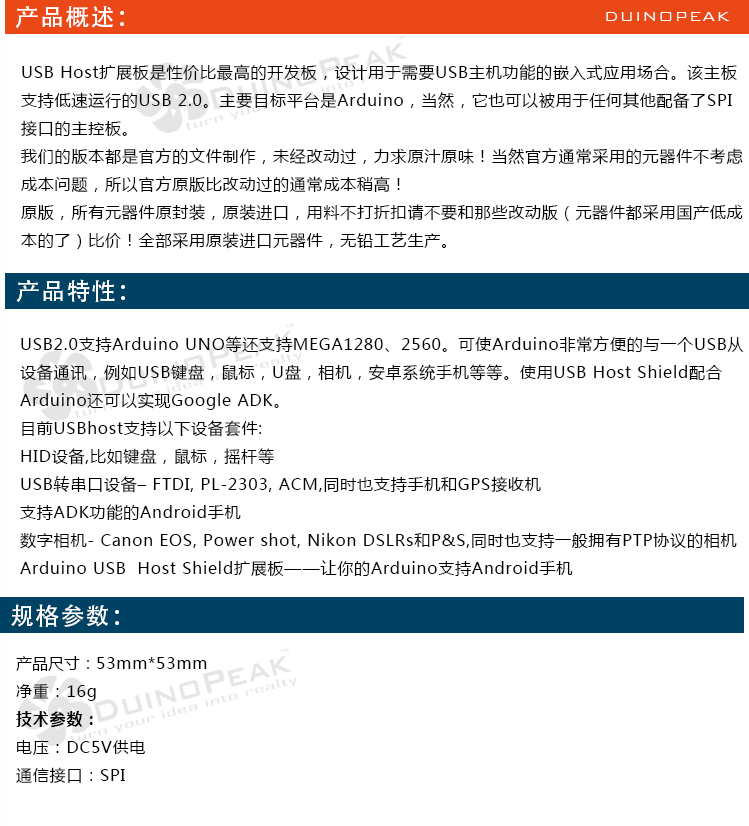
<style>
.page{position:relative;width:749px;height:826px;background:#ffffff}
.page>*{position:absolute;margin:0}
.t1{font:24px "AdobeHeitiStd-Regular";letter-spacing:0.05em;color:#ffffff}
.t2{font:18px "BankGothicBT-Light";letter-spacing:0.05em;color:#ffffff}
.t3{font:16px "MicrosoftYaHei";letter-spacing:0.05em;color:#000000}
.t4{font:16px "MicrosoftYaHei";color:#000000}
.t5{font:16px "MicrosoftYaHei-Bold";letter-spacing:0.05em;color:#000000}
</style>
<div class="page">
<p class="t1" style="left:15px;top:6px;width:109px;height:23px">产品概述：</p>
<p class="t2" style="left:606px;top:12px;width:124px;height:9px">DUINOPEAK</p>
<p class="t3" style="left:21px;top:64px;width:722px;height:185px">USB Host扩展板是性价比最高的开发板，设计用于需要USB主机功能的嵌入式应用场合。该主板<br>支持低速运行的USB 2.0。主要目标平台是Arduino，当然，它也可以被用于任何其他配备了SPI<br>接口的主控板。<br>我们的版本都是官方的文件制作，未经改动过，力求原汁原味！当然官方通常采用的元器件不考虑<br>成本问题，所以官方原版比改动过的通常成本稍高！<br>原版，所有元器件原封装，原装进口，用料不打折扣请不要和那些改动版（元器件都采用国产低成<br>本的了）比价！全部采用原装进口元器件，无铅工艺生产。</p>
<p class="t1" style="left:16px;top:279px;width:109px;height:24px">产品特性：</p>
<p class="t3" style="left:20px;top:336px;width:724px;height:240px">USB2.0支持Arduino UNO等还支持MEGA1280、2560。可使Arduino非常方便的与一个USB从<br>设备通讯，例如USB键盘，鼠标，U盘，相机，安卓系统手机等等。使用USB Host Shield配合<br>Arduino还可以实现Google ADK。<br>目前USBhost支持以下设备套件:<br>HID设备,比如键盘，鼠标，摇杆等<br>USB转串口设备– FTDI, PL-2303, ACM,同时也支持手机和GPS接收机<br>支持ADK功能的Android手机<br>数字相机- Canon EOS, Power shot, Nikon DSLRs和P&amp;S,同时也支持一般拥有PTP协议的相机 <br>Arduino USB  Host Shield扩展板——让你的Arduino支持Android手机</p>
<p class="t1" style="left:11px;top:604px;width:108px;height:23px">规格参数：</p>
<p class="t3" style="left:16px;top:656px;width:191px;height:127px"><span class="t4">产品尺寸：</span>53mm*53mm<br>净重：16g<br><span class="t5">技术参数：<br></span>电压：DC5V供电<br>通信接口：SPI</p>
</div>
